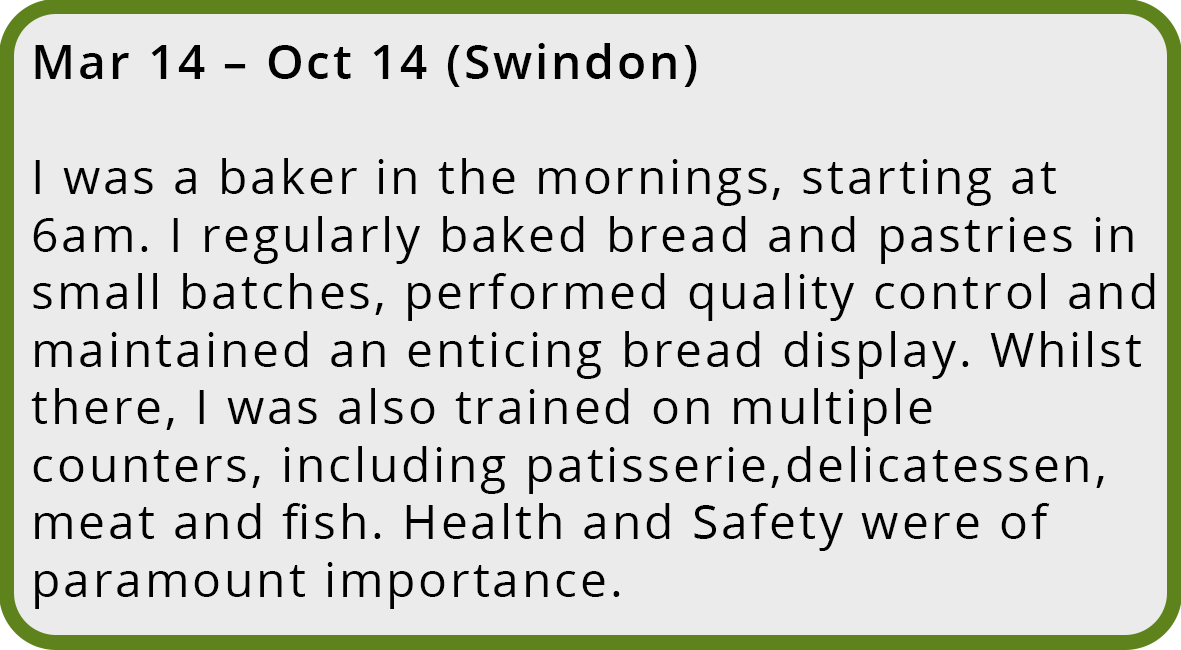
<style>
.page{position:relative;width:1181px;height:650px;background:#ebebeb}
.page>*{position:absolute;margin:0}
.t1{font:47.9px "OpenSans-Regular";letter-spacing:0.06em;color:#000000}
.t2{font:47.9px "OpenSans-SemiBold";letter-spacing:0.06em;color:#000000}
</style>
<div class="page">
<p class="t1" style="left:31px;top:43px;width:1124px;height:566px"><span class="t2">Mar 14 – Oct 14 (Swindon)<br><br></span>I was a baker in the mornings, starting at 6am. I regularly baked bread and pastries in small batches, performed quality control and maintained an enticing bread display. Whilst there, I was also trained on multiple counters, including patisserie,delicatessen,<br>meat and fish. Health and Safety were of paramount importance.</p>
</div>
